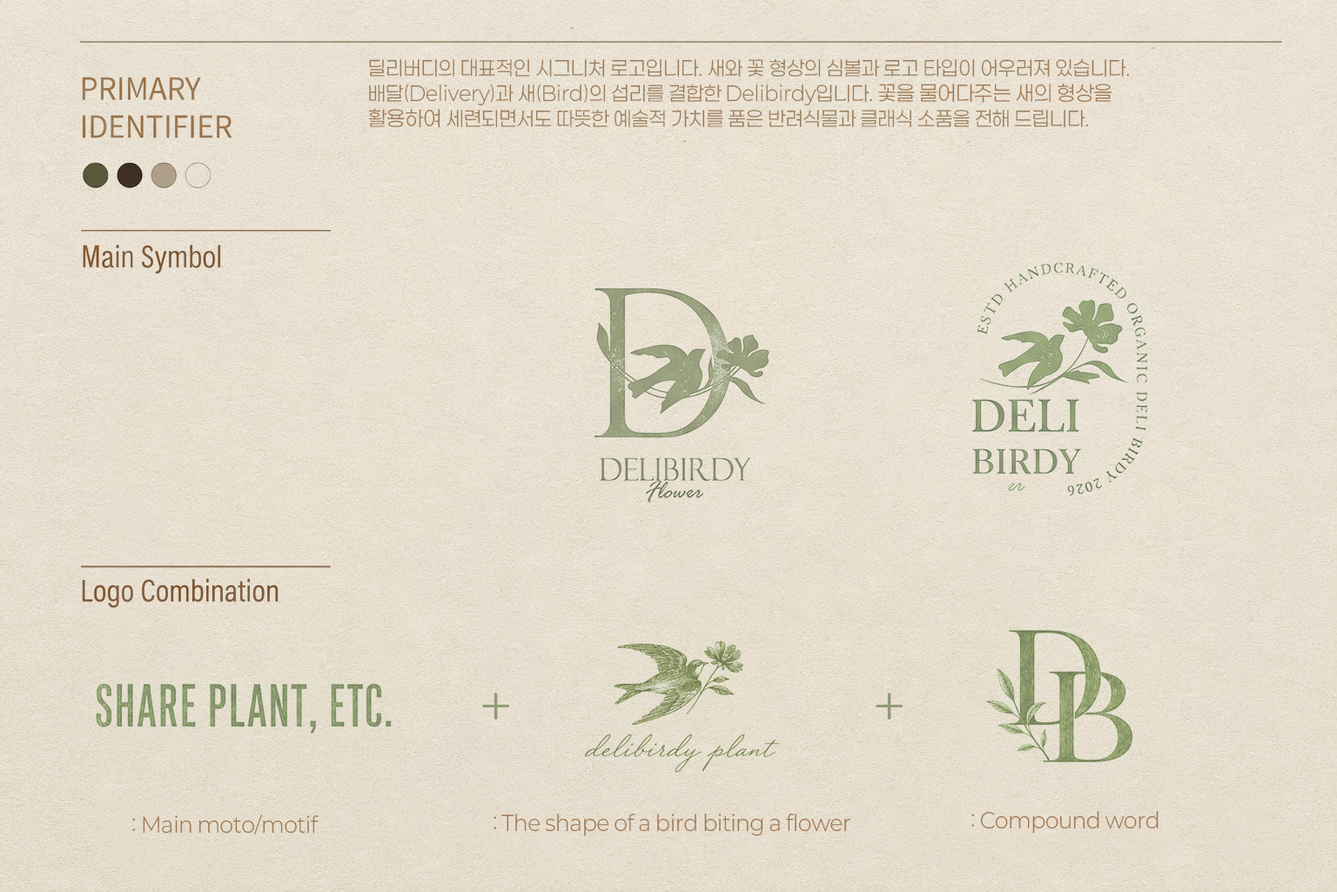
<style>
.page{position:relative;width:1337px;height:892px}
.page>*{position:absolute;margin:0}
.t1{font:20px "Paperlogy-3Light";color:#9b7c58}
.t2{font:20.9px "Paperlogy-3Light";color:#a17850}
.t3{font:52.2px "Gulim";color:#8f9c75}
</style>
<div class="page">
<p class="t1" style="left:368px;top:58px;width:761px;height:70px">딜리버디의 대표적인 시그니처 로고입니다. 새와 꽃 형상의 심볼과 로고 타입이 어우러져 있습니다. <br>배달(Delivery)과 새(Bird)의 섭리를 결합한 Delibirdy입니다. <span class="t2">꽃을 물어다주는 새의 형상을<br>활용하여 </span>세련되면서도 따뜻한 예술적 가치를 품은 반려식물과 클래식 소품을 전해 드립니다.</p>
<p class="t3" style="left:482px;top:692px;width:27px;height:27px">+</p>
<p class="t3" style="left:876px;top:692px;width:27px;height:27px">+</p>
<p class="t2" style="left:132px;top:814px;width:187px;height:21px">: Main moto/motif</p>
<p class="t2" style="left:494px;top:813px;width:357px;height:23px">: The shape of a bird biting a flower</p>
<p class="t2" style="left:972px;top:811px;width:187px;height:22px">: Compound word</p>
</div>
